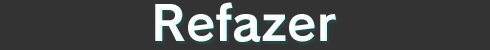
<style>
.page{position:relative;width:490px;height:50px;background:#333333}
.page>*{position:absolute;margin:0}
.t1{font:48px "RodinPro-B";color:#fffeff}
</style>
<div class="page">
<p class="t1" style="left:155px;top:2px;width:181px;height:40px">Refazer</p>
</div>
